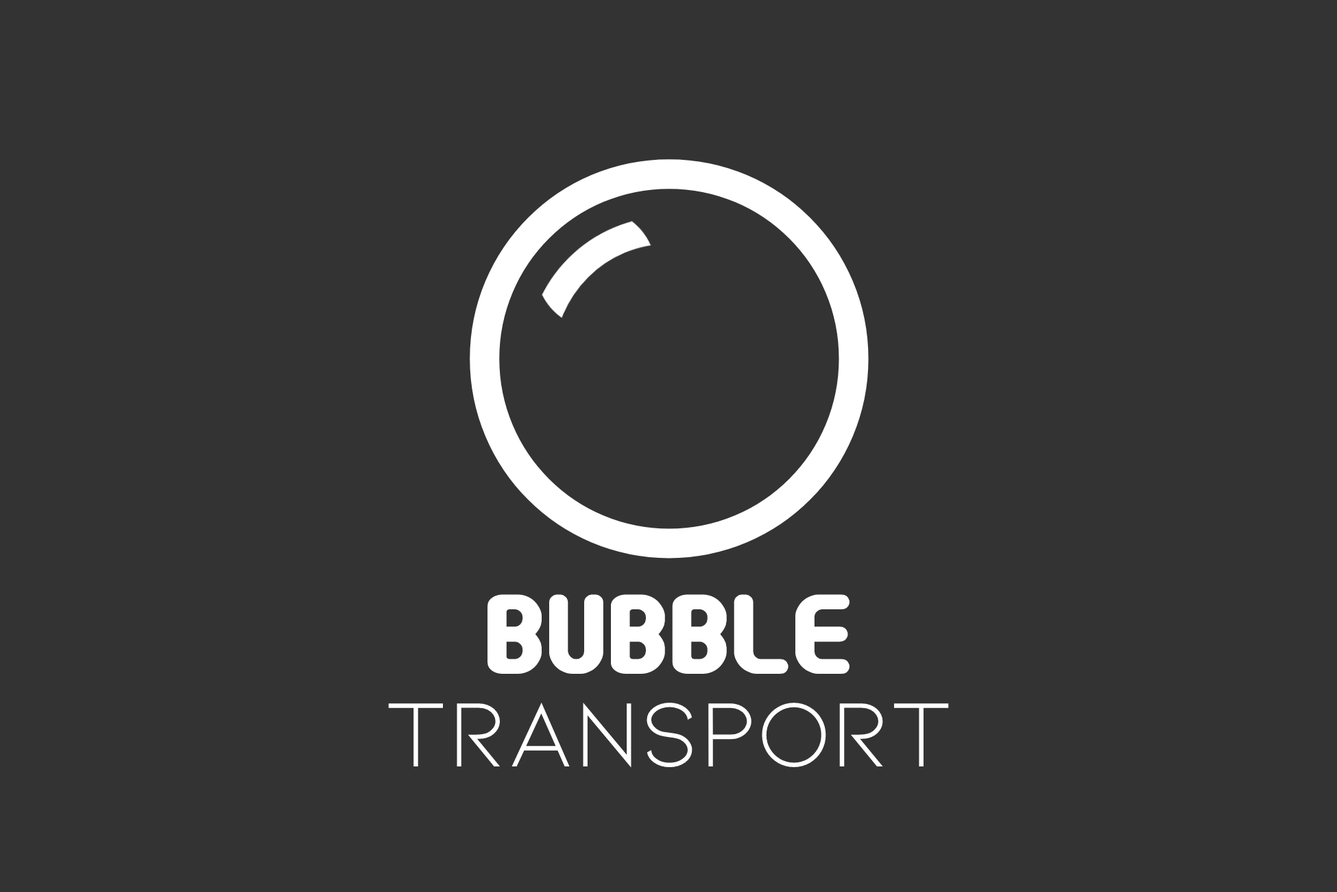
<style>
.page{position:relative;width:1337px;height:892px;background:#333333}
.page>*{position:absolute;margin:0}
.t1{font:96.8px "Round_Pop";color:#ffffff}
.t2{font:96.8px "Kiona-Regular";color:#ffffff}
</style>
<div class="page">
<p class="t1" style="left:488px;top:594px;width:362px;height:80px">Bubble</p>
<p class="t2" style="left:388px;top:702px;width:561px;height:65px">Transport</p>
</div>
